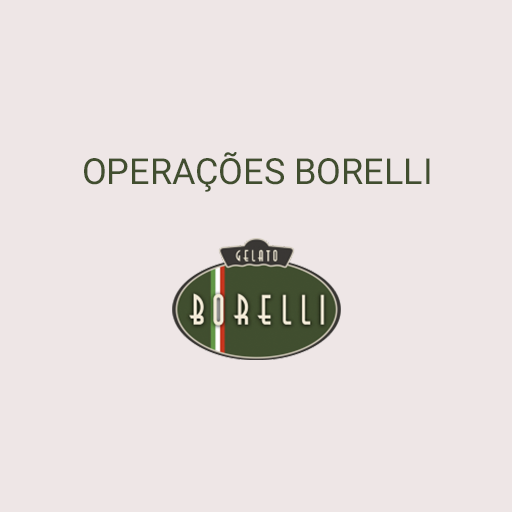
<style>
.page{position:relative;width:512px;height:512px;background:#eee6e6}
.page>*{position:absolute;margin:0}
.t1{font:36px "Roboto-Regular";color:#414e2f}
</style>
<div class="page">
<p class="t1" style="left:84px;top:152px;width:346px;height:40px">OPERAÇÕES BORELLI</p>
</div>
